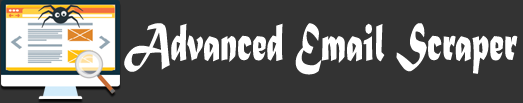
<style>
.page{position:relative;width:523px;height:103px;background:#333333}
.page>*{position:absolute;margin:0}
.t1{font:55.7px "MaturaMTScriptCapitals";color:#ffffff;scale:0.63 1}
</style>
<div class="page">
<p class="t1" style="left:124px;top:23px;width:394px;height:52px">Advanced Email Scraper</p>
</div>
